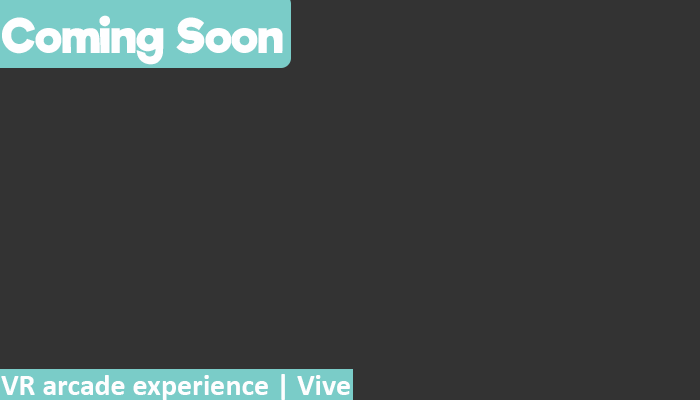
<style>
.page{position:relative;width:700px;height:400px;background:#333333}
.page>*{position:absolute;margin:0}
.t1{font:46px "RifficFree-Bold";color:#fefeff}
.t2{font:30px "Calibri-Bold";color:#fefeff}
.t3{font:30px "Calibri";color:#fefeff}
</style>
<div class="page">
<p class="t1" style="left:2px;top:15px;width:281px;height:50px">Coming Soon</p>
<p class="t2" style="left:1px;top:374px;width:349px;height:26px"><span class="t3"><br></span>VR arcade experience | Vive</p>
</div>
